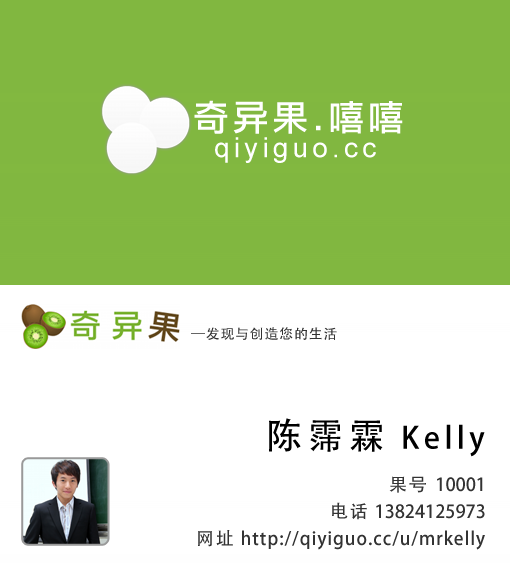
<style>
.page{position:relative;width:510px;height:567px;background:#ffffff}
.page>*{position:absolute;margin:0}
.t1{font:36.1px "LiHeiPro";letter-spacing:0.1em;color:#ffffff}
.t2{font:28px "ArialMT";letter-spacing:0.15em;color:#ffffff}
.t3{font:14px "AdobeHeitiStd-Regular";letter-spacing:0.05em;color:#333333}
.t4{font:30px "AdobeHeitiStd-Regular";letter-spacing:0.15em;color:#000000}
.t5{font:36px "AdobeHeitiStd-Regular";letter-spacing:0.15em;color:#000000}
.t6{font:18px "AdobeHeitiStd-Regular";color:#333333}
.t7{font:18px "AdobeHeitiStd-Regular";letter-spacing:0.1em;color:#333333}
.t8{font:18px "AdobeHeitiStd-Regular";letter-spacing:0.05em;color:#333333}
</style>
<div class="page">
<p class="t1" style="left:194px;top:100px;width:209px;height:34px">奇异果.嘻嘻</p>
<p class="t2" style="left:215px;top:137px;width:161px;height:26px">qiyiguo.cc</p>
<p class="t3" style="left:191px;top:327px;width:146px;height:13px">─发现与创造您的生活</p>
<p class="t4" style="left:269px;top:418px;width:216px;height:39px"><span class="t5">陈霈霖</span> Kelly</p>
<p class="t6" style="left:389px;top:476px;width:94px;height:17px"><span class="t7">果号 </span>10001</p>
<p class="t6" style="left:332px;top:502px;width:153px;height:18px"><span class="t7">电话 </span>13824125973</p>
<p class="t8" style="left:198px;top:530px;width:287px;height:20px"><span class="t7">网址</span> http://qiyiguo.cc/u/mrkelly</p>
</div>
